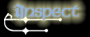
<style>
.page{position:relative;width:90px;height:37px;background:#000000}
.page>*{position:absolute;margin:0}
.t1{font:18px "Celtic-CondensedNormal";color:#94b2da}
.t2{font:18px "CathedralExtendedNormal";color:#94b2da}
</style>
<div class="page">
<p class="t1" style="left:14px;top:3px;width:65px;height:18px"><span class="t2">I</span>nspect</p>
</div>
